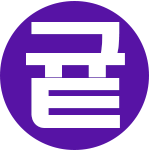
<style>
.page{position:relative;width:150px;height:150px;background:#ffffff}
.page>*{position:absolute;margin:0}
.t1{font:116.7px "H2hdrM";color:#ffffff}
</style>
<div class="page">
<p class="t1" style="left:26px;top:22px;width:99px;height:106px">귵</p>
</div>
